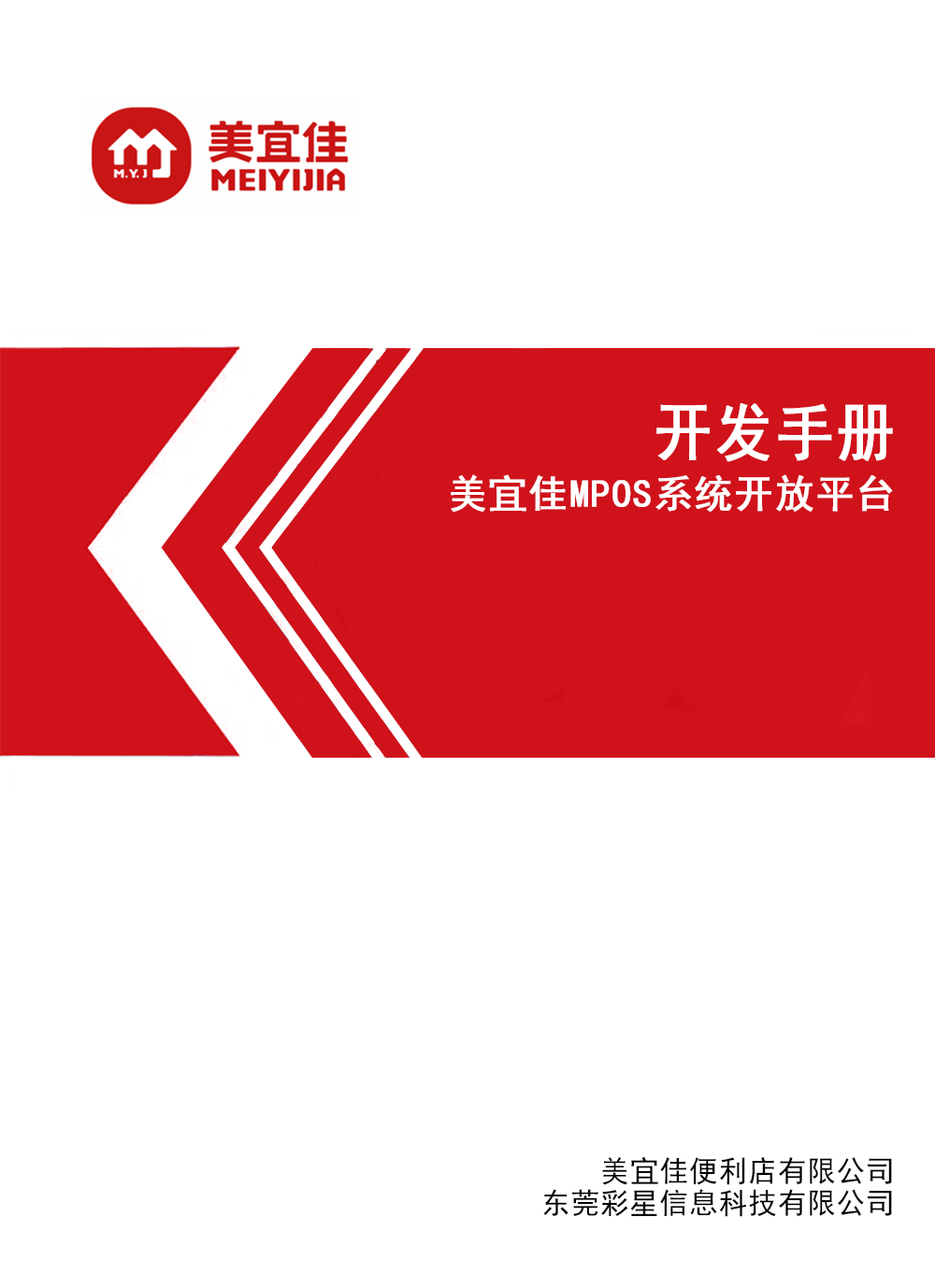
<style>
.page{position:relative;width:935px;height:1275px;background:#ffffff}
.page>*{position:absolute;margin:0}
.t1{font:63.3px "SimHei";letter-spacing:0.025em;color:#ffffff;font-weight:bold;scale:0.91 1}
.t2{font:38.8px "SimHei";letter-spacing:0.025em;color:#ffffff;font-weight:bold}
.t3{font:29.8px "SimHei";letter-spacing:0.025em;color:#000000;scale:0.97 1}
.t4{font:29.1px "SimHei";letter-spacing:0.025em;color:#000000}
</style>
<div class="page">
<p class="t1" style="left:657px;top:403px;width:236px;height:59px">开发手册</p>
<p class="t2" style="left:451px;top:474px;width:442px;height:38px">美宜佳MPOS系统开放平台</p>
<p class="t3" style="left:602px;top:1156px;width:290px;height:29px">美宜佳便利店有限公司</p>
<p class="t4" style="left:543px;top:1189px;width:349px;height:28px">东莞彩星信息科技有限公司</p>
</div>
